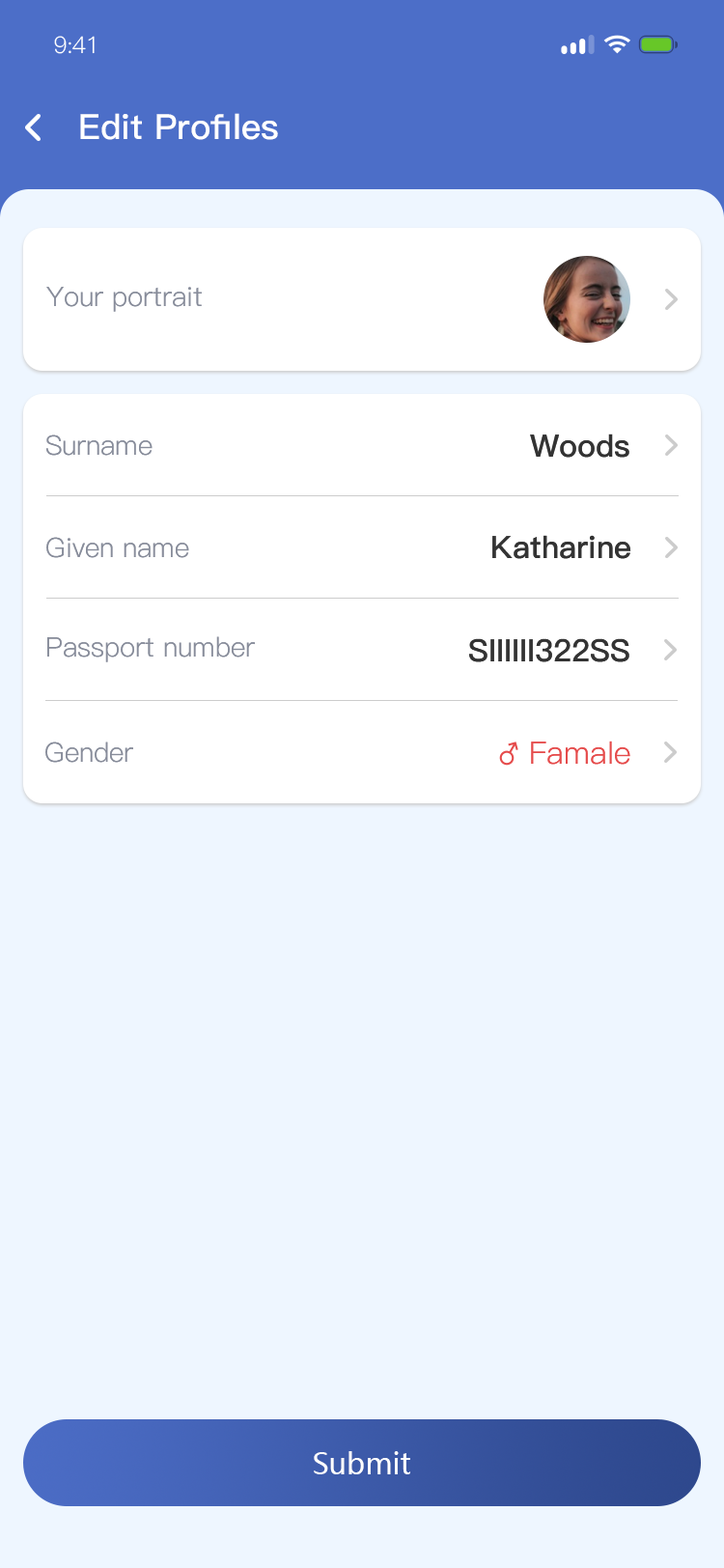
<style>
.page{position:relative;width:724px;height:1568px;background:#eef6ff}
.page>*{position:absolute;margin:0}
.t1{font:23.2px "PingFang-SC-Regular";letter-spacing:-0.025em;color:#ffffff}
.t2{font:34.8px "PingFang-SC-Bold";color:#ffffff}
.t3{font:34.8px "PingFang-SC-Bold";color:#ffffff;text-transform:uppercase}
.t4{font:27px "PingFang-SC-Regular";color:#878c9a}
.t5{font:27px "PingFang-SC-Regular";color:#878c9a;text-transform:uppercase}
.t6{font:30.9px "PingFang-SC-Bold";color:#333333}
.t7{font:30.9px "PingFang-SC-Bold";color:#333333;text-transform:uppercase}
.t8{font:30.9px "PingFang-SC-Regular";color:#e54b4b}
.t9{font:29px "MicrosoftYaHei";color:#ffffff}
</style>
<div class="page">
<p class="t1" style="left:54px;top:36px;width:41px;height:18px">9:41</p>
<p class="t2" style="left:80px;top:113px;width:198px;height:27px"><span class="t3">e</span>dit <span class="t3">p</span>rofiles</p>
<p class="t4" style="left:46px;top:287px;width:156px;height:25px">Your portrait</p>
<p class="t4" style="left:46px;top:434px;width:107px;height:22px"><span class="t5">s</span>urname</p>
<p class="t6" style="left:530px;top:434px;width:100px;height:24px"><span class="t7">W</span>oods</p>
<p class="t4" style="left:46px;top:537px;width:143px;height:21px"><span class="t5">g</span>iven name</p>
<p class="t6" style="left:492px;top:535px;width:139px;height:24px"><span class="t7">K</span>atharine</p>
<p class="t4" style="left:47px;top:636px;width:208px;height:26px"><span class="t5">p</span>assport number</p>
<p class="t7" style="left:469px;top:638px;width:161px;height:24px">SIIIIII322SS</p>
<p class="t4" style="left:45px;top:742px;width:88px;height:21px"><span class="t5">g</span>ender</p>
<p class="t8" style="left:531px;top:741px;width:99px;height:24px">Famale</p>
<p class="t9" style="left:314px;top:1451px;width:96px;height:23px">Submit</p>
</div>
